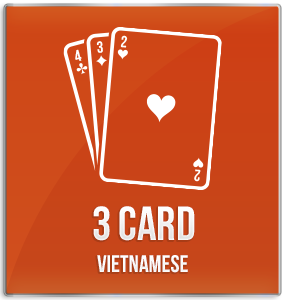
<style>
.page{position:relative;width:285px;height:300px}
.page>*{position:absolute;margin:0}
.t1{font:48px "BebasNeueBold";color:#ffffff;text-transform:uppercase}
.t2{font:24px "BebasNeueBold";color:#ffffff}
</style>
<div class="page">
<p class="t1" style="left:93px;top:206px;width:102px;height:35px">3 card</p>
<p class="t2" style="left:97px;top:255px;width:91px;height:18px">vietnamese</p>
</div>
